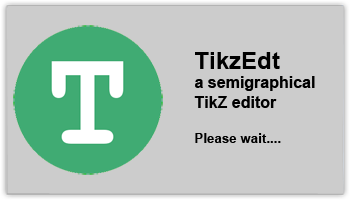
<style>
.page{position:relative;width:350px;height:200px;background:#cccccc}
.page>*{position:absolute;margin:0}
.t1{font:16px "Arial-BoldMT";color:#000000}
.t2{font:24px "Arial-BoldMT";color:#000000}
.t3{font:13.3px "Arial-BoldMT";color:#000000}
</style>
<div class="page">
<p class="t1" style="left:194px;top:52px;width:121px;height:91px"><span class="t2"><br>TikzEdt<br></span>a semigraphical <br>TikZ editor<br><br><span class="t3">Please wait....</span></p>
</div>
